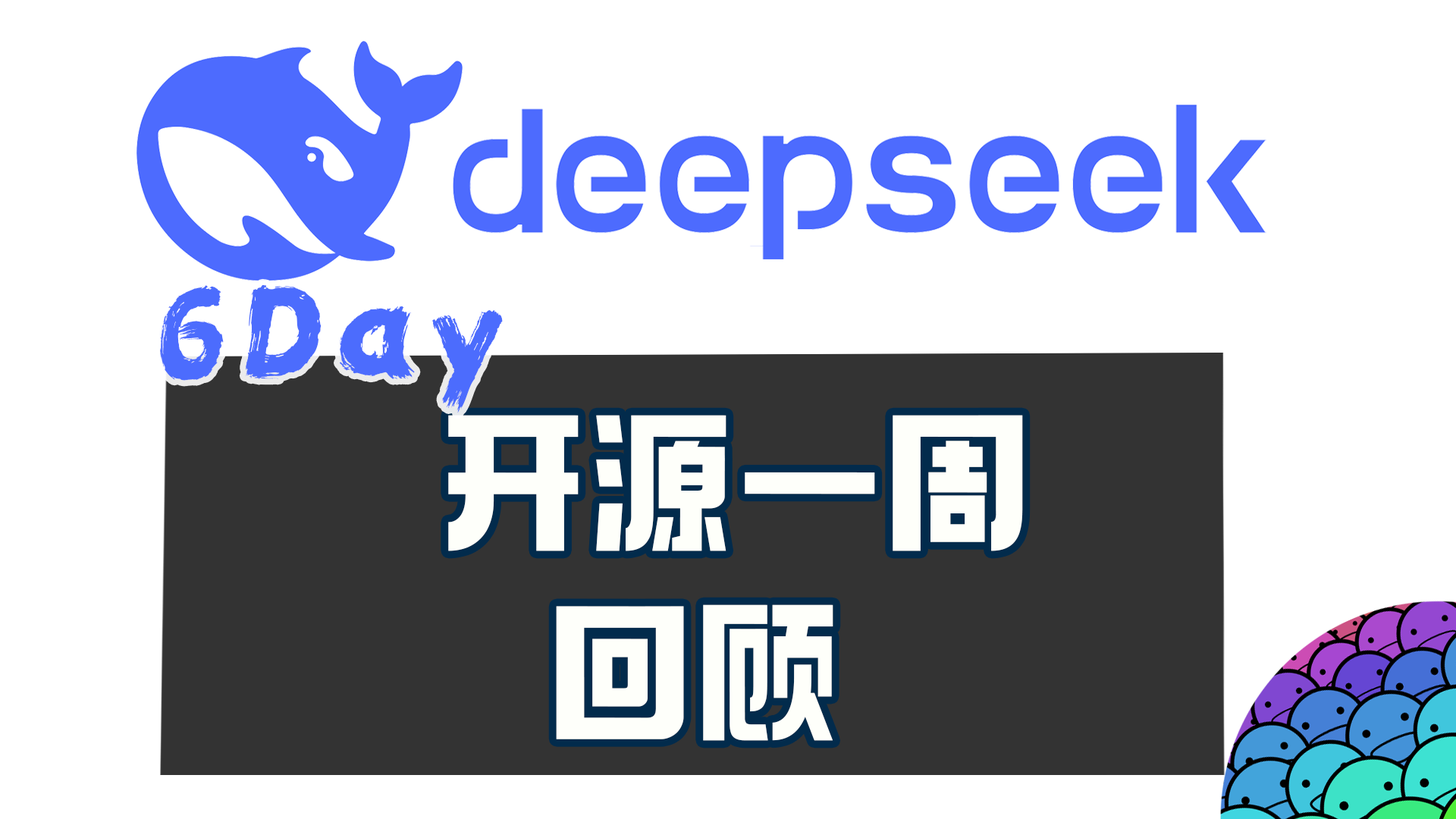
<style>
.page{position:relative;width:1456px;height:819px;background:#ffffff}
.page>*{position:absolute;margin:0}
.t1{font:121.3px "REEJI-CHAO-BeiMingGBT-Flash";letter-spacing:0.05em;color:#4c6cfd}
.t2{font:151.7px/189.6px "098-";letter-spacing:0.05em;color:#fefffa}
</style>
<div class="page">
<p class="t1" style="left:160px;top:284px;width:343px;height:129px;rotate:-1deg">6Day</p>
<p class="t2" style="left:448px;top:415px;width:575px;height:326px;text-align:center">开源一周<br>回顾</p>
</div>
